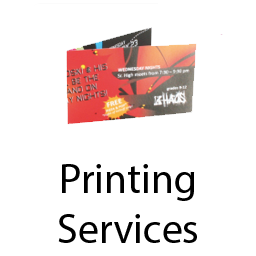
<style>
.page{position:relative;width:256px;height:256px;background:#ffffff}
.page>*{position:absolute;margin:0}
.t1{font:41.7px "MyriadPro-Regular";color:#000000}
</style>
<div class="page">
<p class="t1" style="left:58px;top:164px;width:139px;height:79px;text-align:center">Printing<br>Services</p>
</div>
